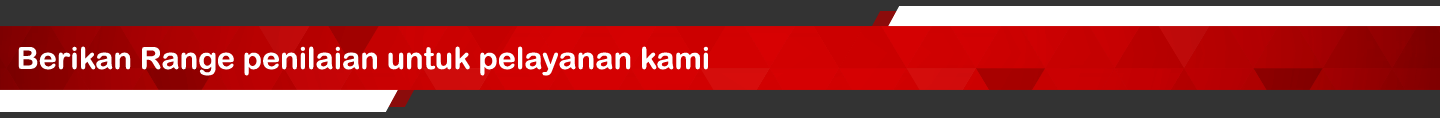
<style>
.page{position:relative;width:1440px;height:118px;background:#333333}
.page>*{position:absolute;margin:0}
.t1{font:30.6px "ArialRoundedMTBold";color:#ffffff}
</style>
<div class="page">
<p class="t1" style="left:18px;top:46px;width:690px;height:30px">Berikan Range penilaian untuk pelayanan kami</p>
</div>
